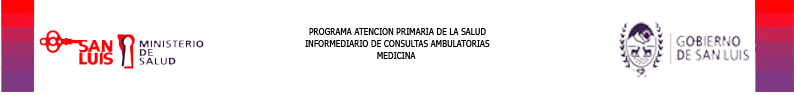
<style>
.page{position:relative;width:794px;height:95px;background:#ffffff}
.page>*{position:absolute;margin:0}
.t1{font:10px "Tahoma";color:#000000;scale:0.84 1}
</style>
<div class="page">
<p class="t1" style="left:305px;top:28px;width:185px;height:31px;text-align:center">PROGRAMA ATENCION PRIMARIA DE LA SALUD<br>INFORMEDIARIO DE CONSULTAS AMBULATORIAS<br>MEDICINA</p>
</div>
